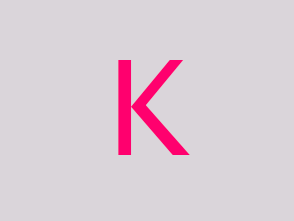
<style>
.page{position:relative;width:294px;height:221px;background:#dad5da}
.page>*{position:absolute;margin:0}
.t1{font:132px "LucidaSans";color:#ff006e}
</style>
<div class="page">
<p class="t1" style="left:118px;top:60px;width:72px;height:95px">K</p>
</div>
